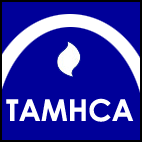
<style>
.page{position:relative;width:142px;height:142px;background:#000099}
.page>*{position:absolute;margin:0}
.t1{font:30px "CenturyGothic-Bold";color:#ffffff}
</style>
<div class="page">
<p class="t1" style="left:6px;top:98px;width:128px;height:24px">TAMHCA</p>
</div>
